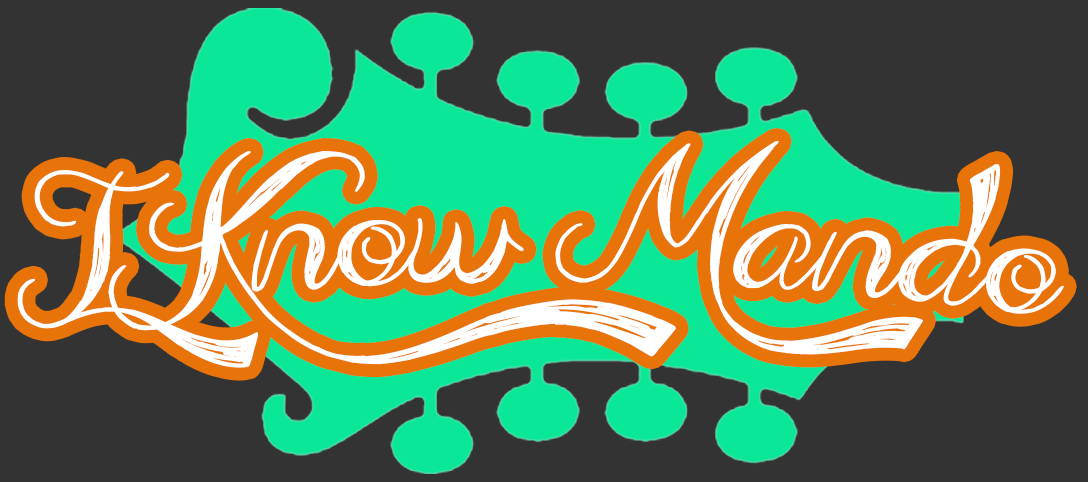
<style>
.page{position:relative;width:1088px;height:482px;background:#333333}
.page>*{position:absolute;margin:0}
.t1{font:132.4px/115.6px "AdmirationPains";color:#ffffff}
</style>
<div class="page">
<p class="t1" style="left:17px;top:141px;width:1047px;height:227px;text-align:center">I Know Mando</p>
</div>
